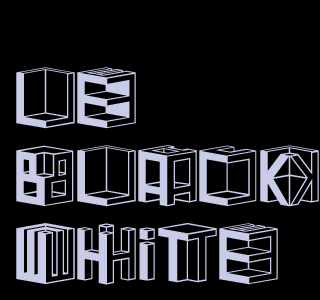
<style>
.page{position:relative;width:320px;height:300px;background:#000000}
.page>*{position:absolute;margin:0}
.t1{font:65px "D3-Cubism";color:#c8cde8}
.t2{font:65px "D3-Cubism";color:#99a2d1}
</style>
<div class="page">
<p class="t1" style="left:16px;top:67px;width:303px;height:218px"><span class="t2"><br></span>Le<br>BLACK<br>WHITE</p>
</div>
